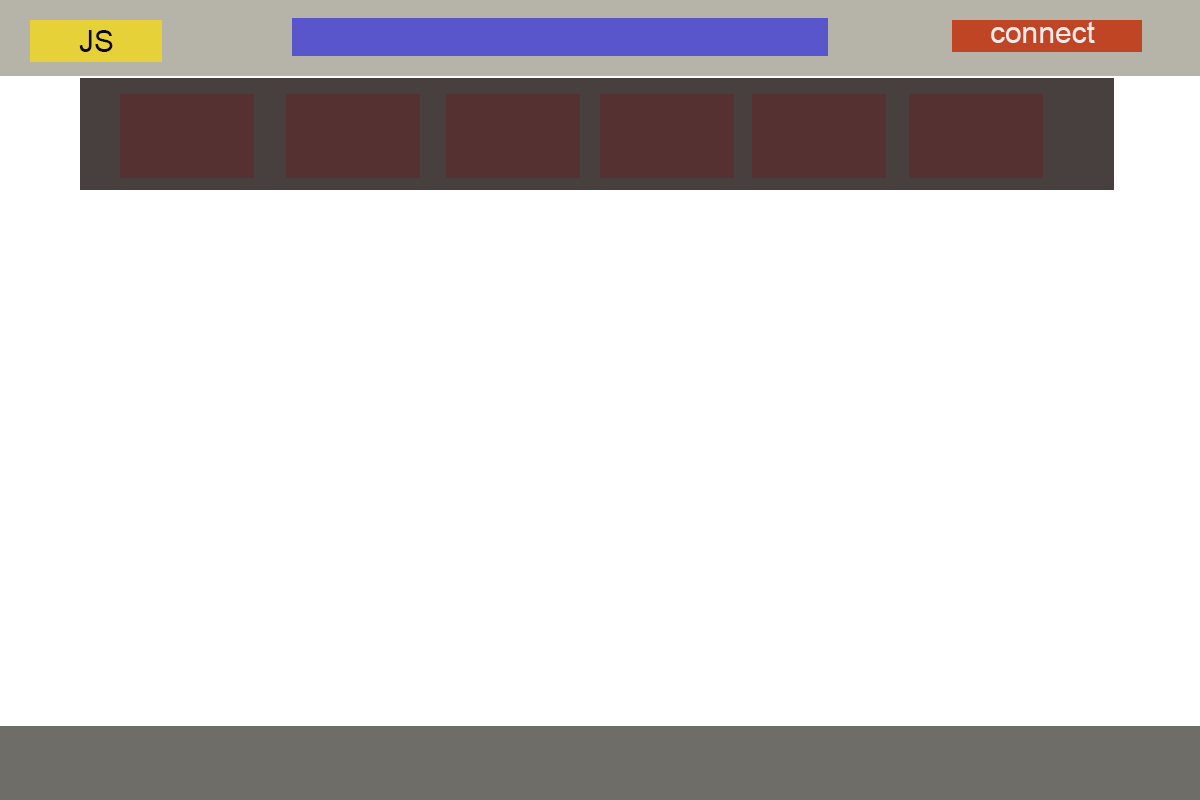
<style>
.page{position:relative;width:1200px;height:800px;background:#ffffff}
.page>*{position:absolute;margin:0}
.t1{font:30px "ArialMT";color:#0a080a}
.t2{font:30px "ArialMT";color:#f0e9e8}
</style>
<div class="page">
<p class="t1" style="left:79px;top:30px;width:34px;height:22px">JS</p>
<p class="t2" style="left:991px;top:21px;width:104px;height:22px">connect</p>
</div>
